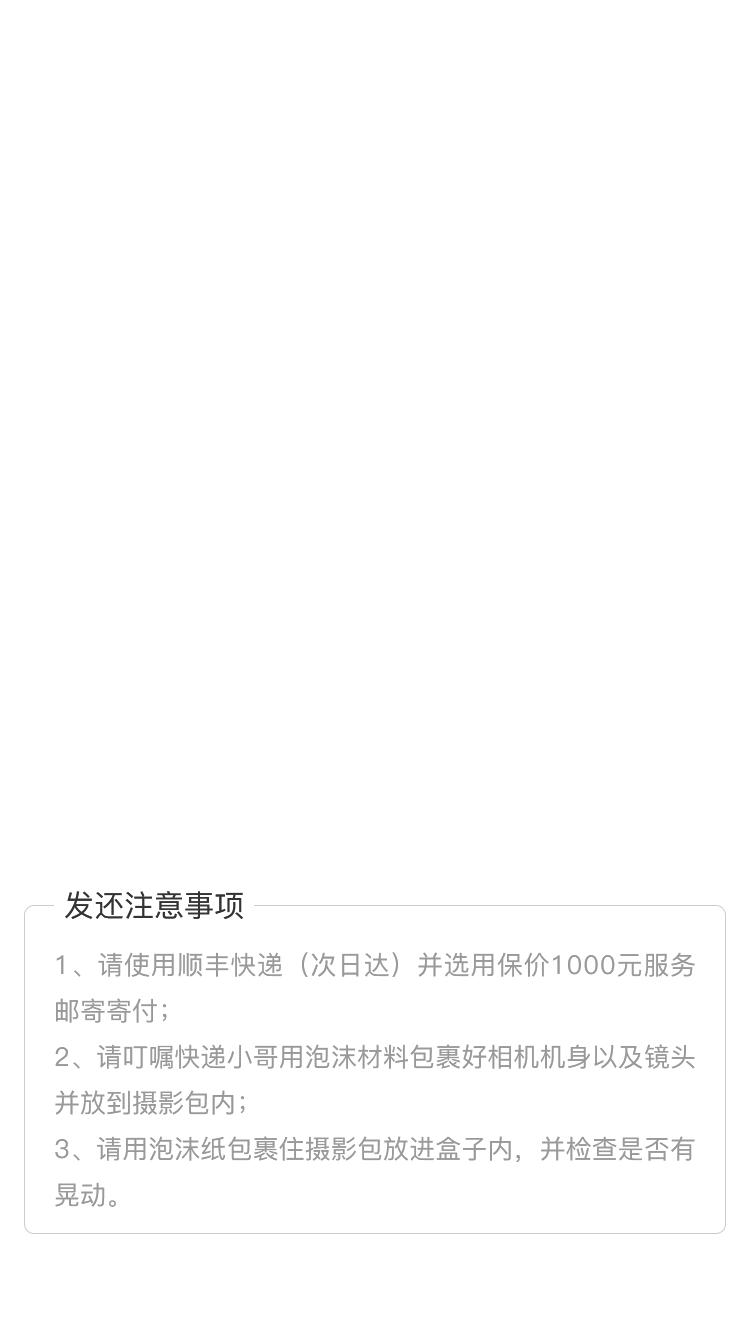
<style>
.page{position:relative;width:750px;height:1334px;background:#ffffff}
.page>*{position:absolute;margin:0}
.t1{font:30px "PingFang-SC-Medium";color:#333333;text-transform:uppercase}
.t2{font:26px/46px "PingFang-SC-Medium";color:#999999;text-transform:uppercase}
</style>
<div class="page">
<p class="t1" style="left:65px;top:891px;width:178px;height:28px">发还注意事项</p>
<p class="t2" style="left:55px;top:952px;width:640px;height:255px;text-align:justify">1、请使用顺丰快递（次日达）并选用保价1000元服务邮寄寄付；<br>2、请叮嘱快递小哥用泡沫材料包裹好相机机身以及镜头并放到摄影包内；<br>3、请用泡沫纸包裹住摄影包放进盒子内，并检查是否有晃动。</p>
</div>
